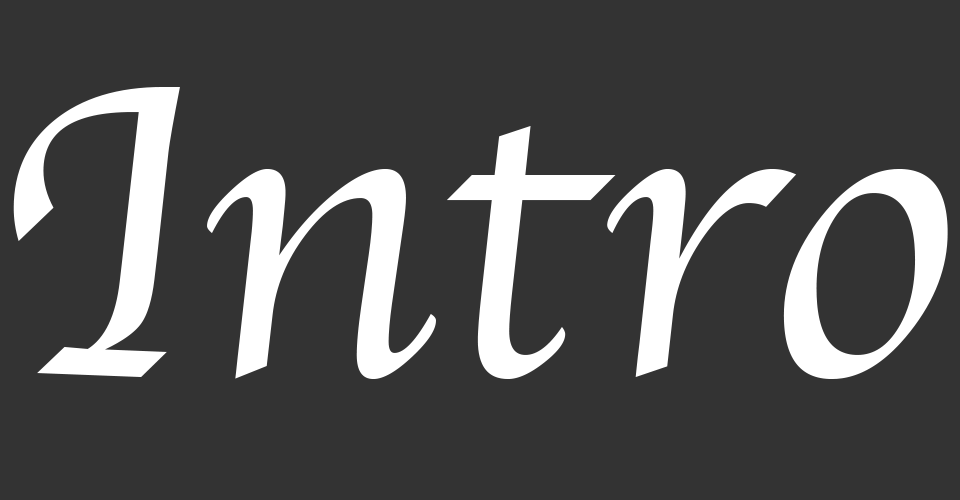
<style>
.page{position:relative;width:960px;height:500px;background:#333333}
.page>*{position:absolute;margin:0}
.t1{font:436.4px "Apple-Chancery";color:#ffffff}
</style>
<div class="page">
<p class="t1" style="left:13px;top:87px;width:935px;height:292px">Intro</p>
</div>
